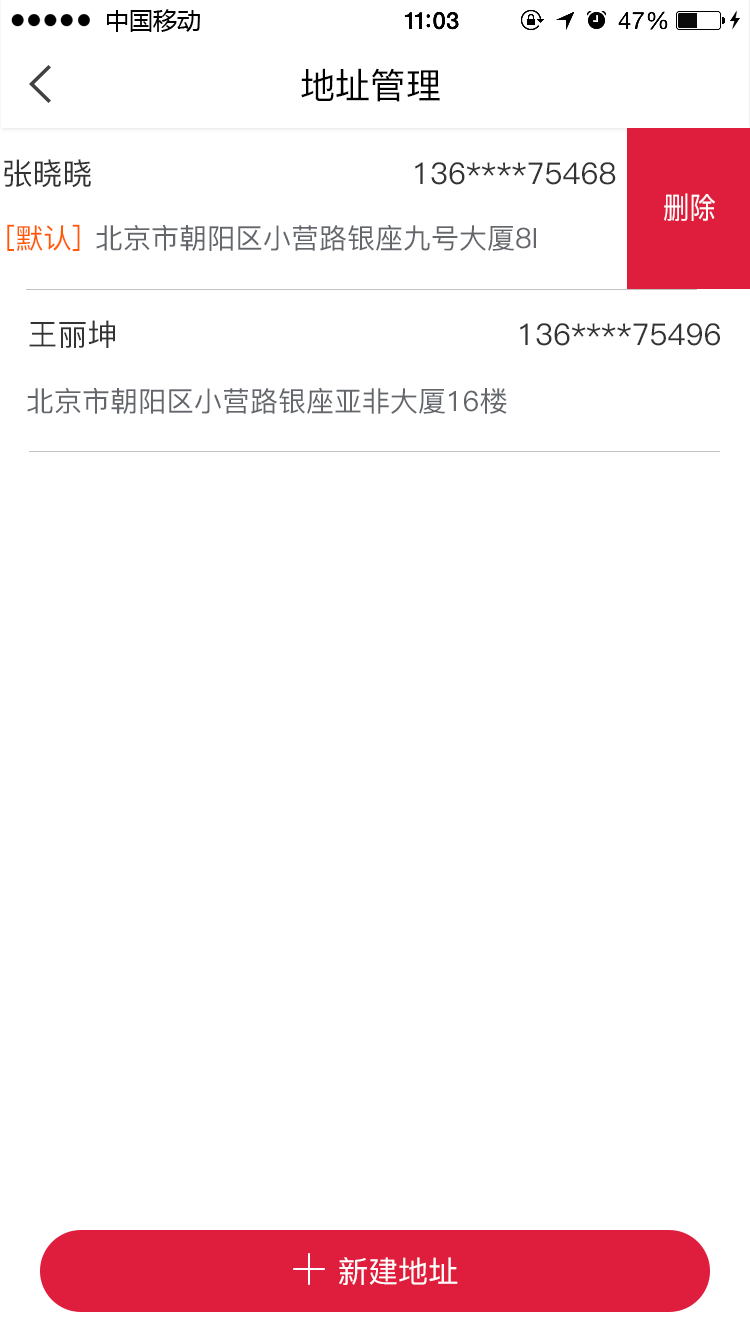
<style>
.page{position:relative;width:750px;height:1334px;background:#ffffff}
.page>*{position:absolute;margin:0}
.t1{font:35.7px "PingFang-SC-Medium";color:#000000}
.t2{font:30px "PingFang-SC-Medium";color:#333333}
.t3{font:30px "PingFang-SC-Medium";color:#ffffff;scale:0.88 1}
.t4{font:28px "PingFang-SC-Medium";color:#ff5a00}
.t5{font:28px "PingFang-SC-Medium";color:#63666b}
.t6{font:29.9px "PingFang-SC-Medium";color:#ffffff}
</style>
<div class="page">
<p class="t1" style="left:301px;top:68px;width:139px;height:34px">地址管理</p>
<p class="t2" style="left:4px;top:159px;width:612px;height:28px">张晓晓                                136****75468</p>
<p class="t3" style="left:664px;top:193px;width:51px;height:28px">删除</p>
<p class="t4" style="left:7px;top:224px;width:73px;height:27px">[默认]</p>
<p class="t5" style="left:96px;top:224px;width:440px;height:27px">北京市朝阳区小营路银座九号大厦8I</p>
<p class="t2" style="left:29px;top:320px;width:691px;height:28px">王丽坤                                        136****75496</p>
<p class="t5" style="left:27px;top:387px;width:480px;height:27px">北京市朝阳区小营路银座亚非大厦16楼</p>
<p class="t6" style="left:339px;top:1257px;width:119px;height:28px">新建地址</p>
</div>
